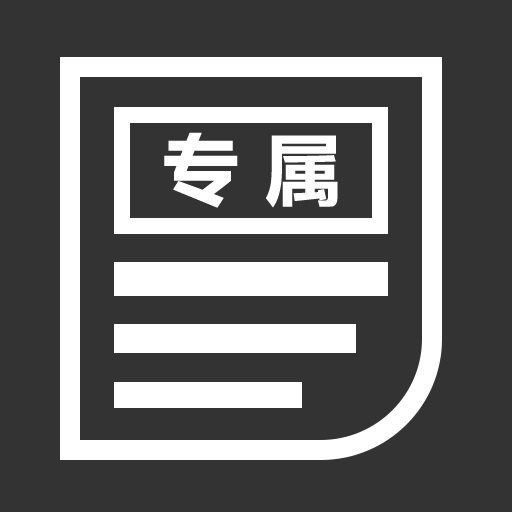
<style>
.page{position:relative;width:512px;height:512px;background:#333333}
.page>*{position:absolute;margin:0}
.t1{font:76px "MicrosoftYaHei-Bold";letter-spacing:0.32em;color:#ffffff;font-weight:bold}
</style>
<div class="page">
<p class="t1" style="left:164px;top:132px;width:174px;height:76px">专属</p>
</div>
